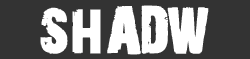
<style>
.page{position:relative;width:250px;height:59px;background:#333333}
.page>*{position:absolute;margin:0}
.t1{font:61.8px "28DaysLater";letter-spacing:-0.025em;color:#ffffff;font-weight:bold;scale:0.9 1}
</style>
<div class="page">
<p class="t1" style="left:40px;top:5px;width:169px;height:50px">SHADW</p>
</div>
